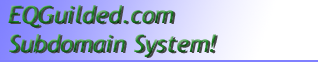
<style>
.page{position:relative;width:318px;height:62px}
.page>*{position:absolute;margin:0}
.t1{font:24px "TrebuchetMS-Italic"}
.t2{font:24px "TrebuchetMS-Italic";color:#474747}
</style>
<div class="page">
<p class="t1" style="left:8px;top:5px;width:208px;height:52px">EQGuilded.com<br>Subdomain System!</p>
<p class="t2" style="left:10px;top:6px;width:208px;height:52px">EQGuilded.com<br>Subdomain System!</p>
</div>
